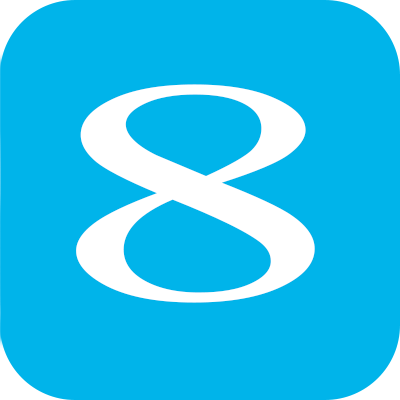
<style>
.page{position:relative;width:400px;height:400px;background:#00b4ea}
.page>*{position:absolute;margin:0}
.t1{font:317.2px "TimesNewRomanPSMT";letter-spacing:0.08em;color:#ffffff;font-weight:bold;scale:1.96 1}
</style>
<div class="page">
<p class="t1" style="left:76px;top:84px;width:239px;height:219px">8</p>
</div>
